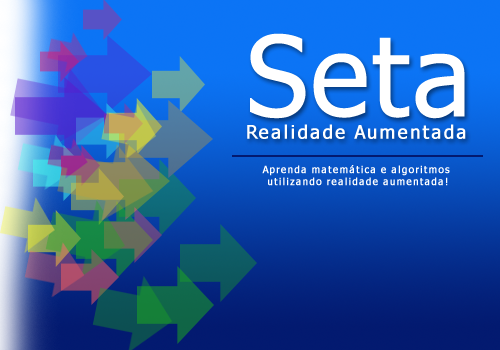
<style>
.page{position:relative;width:500px;height:350px}
.page>*{position:absolute;margin:0}
.t1{font:18.5px "Tahoma";letter-spacing:0.075em;color:#ffffff;font-weight:bold}
.t2{font:111.1px "Tahoma";color:#ffffff;font-weight:bold}
.t3{font:10px "Tahoma";letter-spacing:0.075em;color:#ffffff;font-weight:bold}
</style>
<div class="page">
<p class="t1" style="left:247px;top:33px;width:219px;height:106px"><span class="t2">Seta <br></span>Realidade Aumentada</p>
<p class="t3" style="left:262px;top:165px;width:188px;height:21px;text-align:center">Aprenda matemática e algoritmos <br>utilizando realidade aumentada!</p>
</div>
